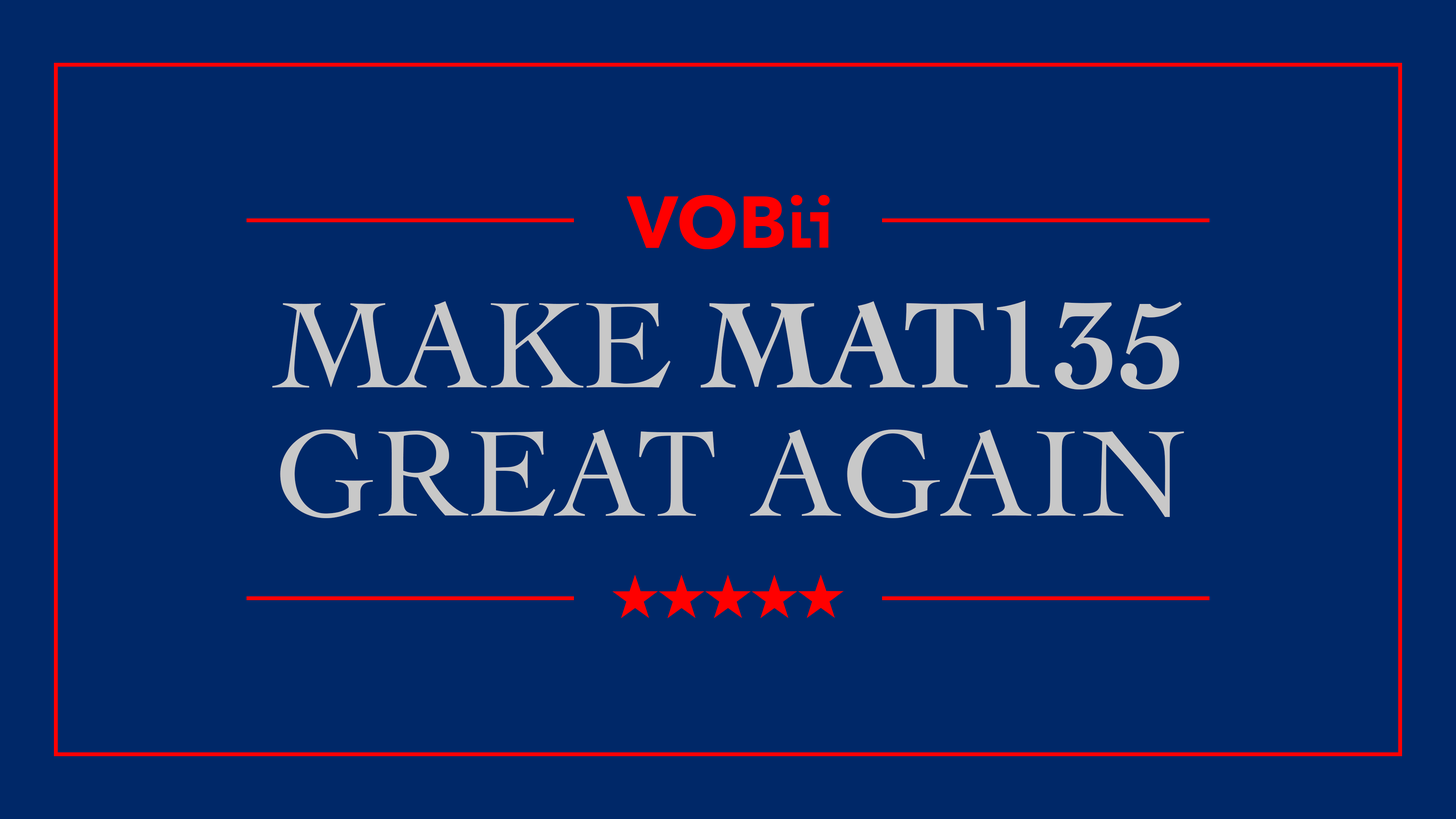
<style>
.page{position:relative;width:1456px;height:819px;background:#002868}
.page>*{position:absolute;margin:0}
.t1{font:128.4px/128.4px "Cochin";color:#c8c8c8}
.t2{font:128.4px/128.4px "Cochin-Bold";color:#c8c8c8}
</style>
<div class="page">
<p class="t1" style="left:272px;top:300px;width:912px;height:218px;text-align:center">MAKE <span class="t2">MAT135<br></span>GREAT AGAIN</p>
</div>
